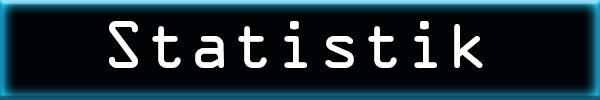
<style>
.page{position:relative;width:600px;height:100px;background:#000305}
.page>*{position:absolute;margin:0}
.t1{font:60px "OCRAStd";color:#ffffff}
</style>
<div class="page">
<p class="t1" style="left:109px;top:21px;width:374px;height:47px">Statistik</p>
</div>
